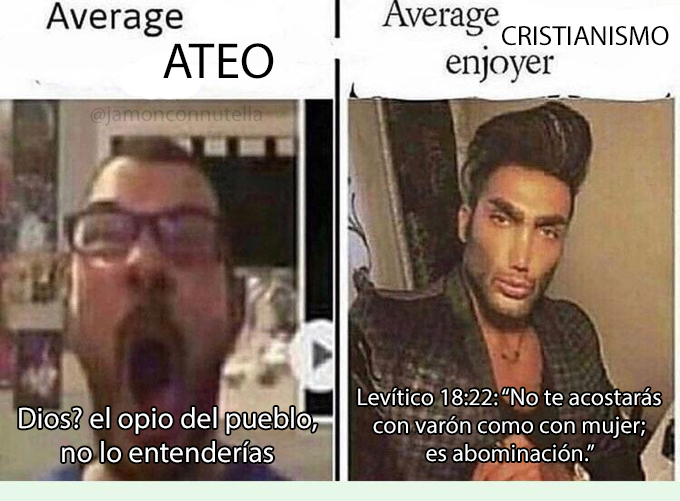
<style>
.page{position:relative;width:680px;height:501px}
.page>*{position:absolute;margin:0}
.t1{font:27.7px "MyriadPro-Regular";color:#000000}
.t2{font:50.8px "MyriadPro-Regular";color:#000000}
.t3{font:22.1px "MyriadPro-Regular"}
.t4{font:24px "MyriadPro-Regular";color:#ffffff}
.t5{font:29.5px "MyriadPro-Regular";color:#ffffff}
</style>
<div class="page">
<p class="t1" style="left:502px;top:26px;width:167px;height:20px">CRISTIANISMO</p>
<p class="t2" style="left:163px;top:43px;width:111px;height:36px">ATEO</p>
<p class="t3" style="left:90px;top:105px;width:172px;height:21px">@jamonconnutella</p>
<p class="t4" style="left:358px;top:388px;width:303px;height:74px;text-align:center">Levítico 18:22: “No te acostarás<br>con varón como con mujer;<br>es abominación.”</p>
<p class="t5" style="left:19px;top:407px;width:298px;height:56px;text-align:center">Dios? el opio del pueblo,<br>no lo entenderías</p>
</div>
